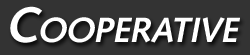
<style>
.page{position:relative;width:250px;height:55px;background:#333333}
.page>*{position:absolute;margin:0}
.t1{font:50px "Syntax-Bold";letter-spacing:-0.02em;color:#ffffff;font-variant:small-caps;font-style:italic}
</style>
<div class="page">
<p class="t1" style="left:10px;top:6px;width:230px;height:37px">Cooperative</p>
</div>
